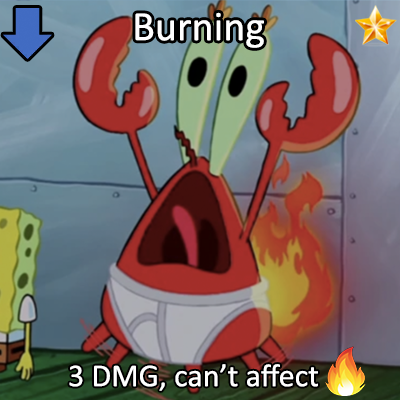
<style>
.page{position:relative;width:400px;height:400px}
.page>*{position:absolute;margin:0}
.t1{font:72px "Calibri";color:#ffffff}
.t2{font:55px "Calibri";color:#ffffff}
</style>
<div class="page">
<p class="t1" style="left:135px;top:12px;width:129px;height:36px">Burning</p>
<p class="t2" style="left:69px;top:364px;width:249px;height:27px">3 DMG, can’t affect</p>
</div>
